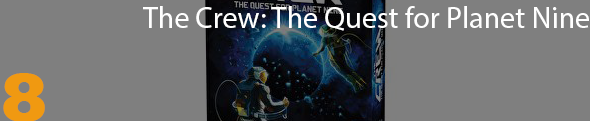
<style>
.page{position:relative;width:590px;height:121px;background:#7f7f7f}
.page>*{position:absolute;margin:0}
.t1{font:30px "MyriadPro-Regular";color:#ffffff}
.t2{font:70px "Rockwell-ExtraBold";color:#f09911}
</style>
<div class="page">
<p class="t1" style="left:143px;top:6px;width:446px;height:25px">The Crew: The Quest for Planet Nine</p>
<p class="t2" style="left:3px;top:73px;width:42px;height:49px">8</p>
</div>
